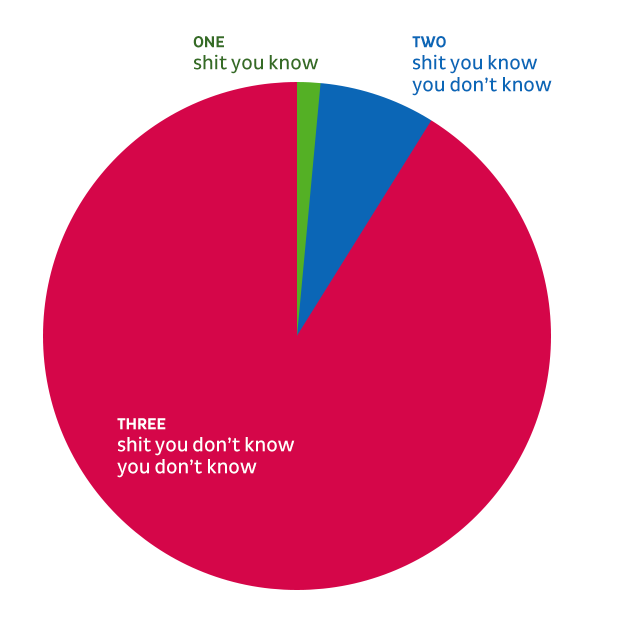
<style>
.page{position:relative;width:633px;height:637px;background:#ffffff}
.page>*{position:absolute;margin:0}
.t1{font:20px/22px "PlutoSansCondRegular";color:#356b25}
.t2{font:16px/22px "PlutoSansCondBold";color:#356b25}
.t3{font:20px/22px "PlutoSansCondRegular";color:#0b66b6}
.t4{font:16px/22px "PlutoSansCondBold";color:#0b66b6}
.t5{font:20px/22px "PlutoSansCondRegular";color:#ffffff}
.t6{font:16px/22px "PlutoSansCondBold";color:#ffffff}
</style>
<div class="page">
<p class="t1" style="left:193px;top:36px;width:126px;height:38px"><span class="t2">ONE<br></span>shit you know</p>
<p class="t3" style="left:412px;top:36px;width:140px;height:60px"><span class="t4">TWO<br></span>shit you know<br>you don’t know</p>
<p class="t5" style="left:117px;top:418px;width:178px;height:60px"><span class="t6">THREE<br></span>shit you don’t know<br>you don’t know</p>
</div>
